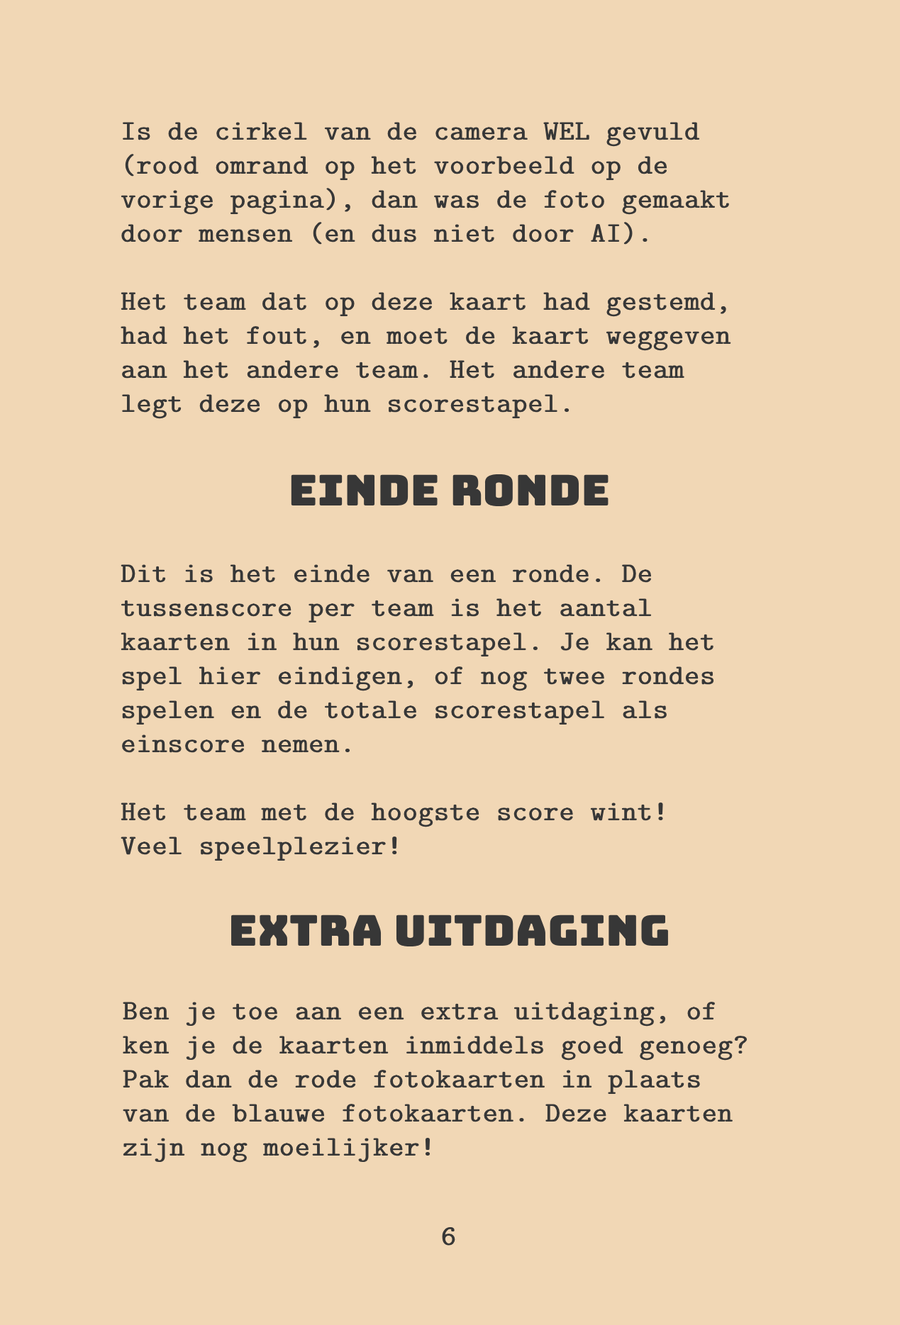
<style>
.page{position:relative;width:900px;height:1325px;background:#f1d7b5}
.page>*{position:absolute;margin:0}
.t1{font:28.4px "CMUTypewriter-Regular";color:#373737;font-weight:bold}
.t2{font:42.5px "Bungee-Regular";color:#373737;font-weight:bold}
</style>
<div class="page">
<p class="t1" style="left:121px;top:122px;width:610px;height:739px">Is de cirkel van de camera WEL gevuld <br>(rood omrand op het voorbeeld op de<br>vorige pagina), dan was de foto gemaakt <br>door mensen (en dus niet door AI). <br><br>Het team dat op deze kaart had gestemd, <br>had het fout, en moet de kaart weggeven<br>aan het andere team. Het andere team <br>legt deze op hun scorestapel.<br><br><br><br><br>Dit is het einde van een ronde. De <br>tussenscore per team is het aantal <br>kaarten in hun scorestapel. Je kan het <br>spel hier eindigen, of nog twee rondes <br>spelen en de totale scorestapel als <br>einscore nemen. <br><br>Het team met de hoogste score wint! <br>Veel speelplezier!</p>
<p class="t2" style="left:291px;top:474px;width:317px;height:32px">Einde Ronde</p>
<p class="t2" style="left:231px;top:915px;width:437px;height:32px">Extra Uitdaging</p>
<p class="t1" style="left:123px;top:1002px;width:624px;height:161px">Ben je toe aan een extra uitdaging, of <br>ken je de kaarten inmiddels goed genoeg? <br>Pak dan de rode fotokaarten in plaats <br>van de blauwe fotokaarten. Deze kaarten <br>zijn nog moeilijker!</p>
<p class="t1" style="left:442px;top:1227px;width:13px;height:19px">6</p>
</div>
